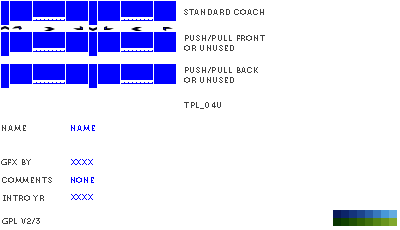
<style>
.page{position:relative;width:400px;height:230px;background:#ffffff}
.page>*{position:absolute;margin:0}
.t1{font:8px "Museo700-Regular";letter-spacing:0.075em;color:#404040;text-transform:uppercase}
.t2{font:8px "Museo700-Regular";letter-spacing:0.075em;color:#0000ff;text-transform:uppercase}
</style>
<div class="page">
<p class="t1" style="left:184px;top:9px;width:80px;height:6px">standard coach</p>
<p class="t1" style="left:184px;top:35px;width:81px;height:16px">push/pull front<br>or unused</p>
<p class="t1" style="left:184px;top:67px;width:74px;height:16px">push/pull back<br>or unused</p>
<p class="t1" style="left:184px;top:102px;width:37px;height:7px">tpl_04u</p>
<p class="t1" style="left:2px;top:125px;width:24px;height:6px">name</p>
<p class="t2" style="left:71px;top:125px;width:24px;height:6px">name</p>
<p class="t1" style="left:1px;top:159px;width:30px;height:6px">gfx by</p>
<p class="t2" style="left:71px;top:159px;width:22px;height:6px">xxxx</p>
<p class="t1" style="left:2px;top:177px;width:50px;height:6px">comments</p>
<p class="t2" style="left:71px;top:177px;width:23px;height:6px">none</p>
<p class="t1" style="left:3px;top:195px;width:41px;height:6px">intro yr</p>
<p class="t2" style="left:71px;top:194px;width:22px;height:6px">xxxx</p>
<p class="t1" style="left:2px;top:218px;width:38px;height:6px">gpl v2/3</p>
</div>
